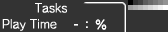
<style>
.page{position:relative;width:168px;height:32px;background:#333333}
.page>*{position:absolute;margin:0}
.t1{font:12px/16px "RodinNTLGPro-M";color:#ffffff}
.t2{font:10.8px/16px "RodinNTLGPro-M";color:#ffffff;scale:1.11 1}
</style>
<div class="page">
<p class="t1" style="left:2px;top:3px;width:65px;height:28px">Tasks<br>Pla<span class="t2">y</span> Time</p>
</div>
